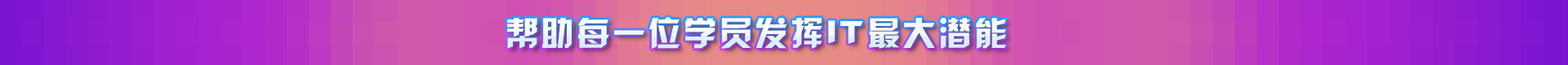
<style>
.page{position:relative;width:1568px;height:65px}
.page>*{position:absolute;margin:0}
.t1{font:33.3px "HYk2gj";letter-spacing:0.07em;color:#fffefe}
</style>
<div class="page">
<p class="t1" style="left:507px;top:17px;width:499px;height:32px">帮助每一位学员发挥IT最大潜能</p>
<p class="t1" style="left:507px;top:17px;width:499px;height:32px">帮助每一位学员发挥IT最大潜能</p>
</div>
